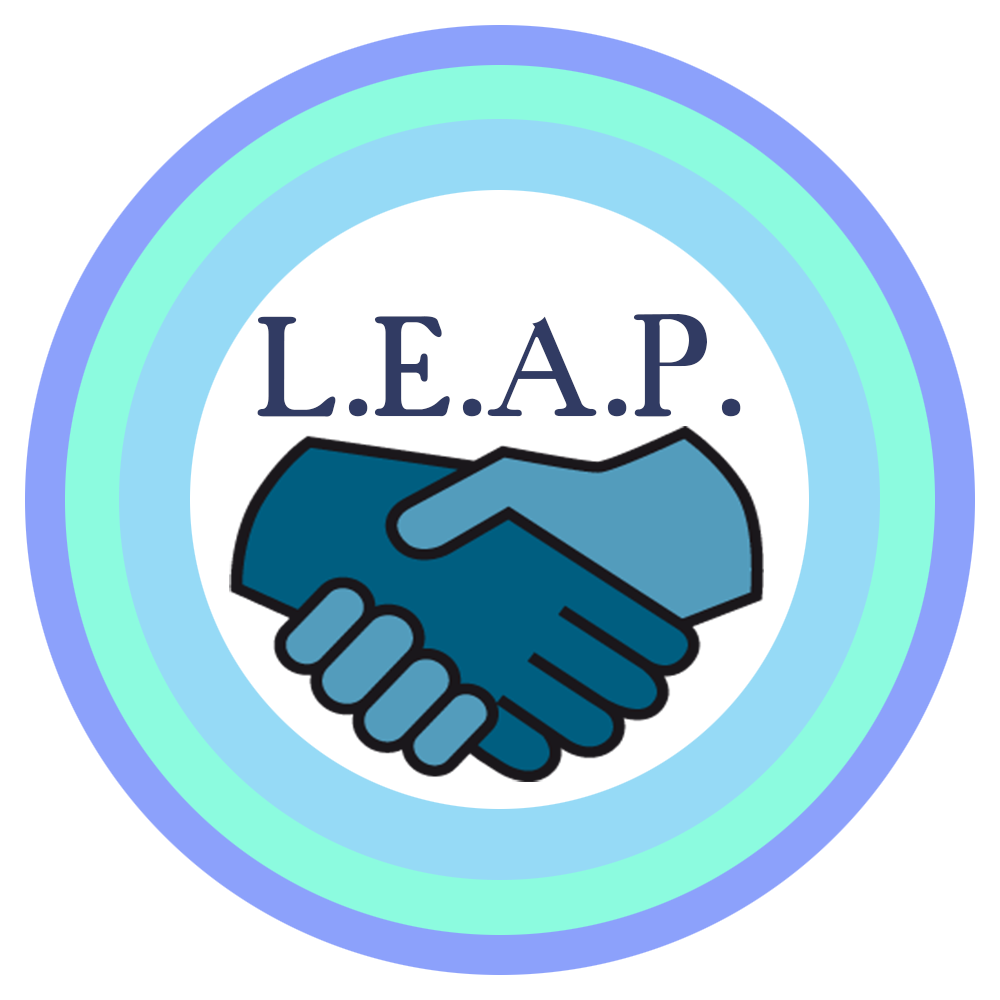
<style>
.page{position:relative;width:1000px;height:1000px;background:#ffffff}
.page>*{position:absolute;margin:0}
.t1{font:200px "18thCentury";color:#313b63}
</style>
<div class="page">
<p class="t1" style="left:257px;top:314px;width:484px;height:103px">L.E.A.P.</p>
</div>
